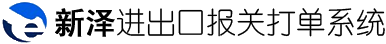
<style>
.page{position:relative;width:386px;height:44px;background:#ffffff}
.page>*{position:absolute;margin:0}
.t1{font:30px "SimHei";color:#000000;font-weight:bold}
.t2{font:30px "YouYuan";color:#000000}
</style>
<div class="page">
<p class="t1" style="left:55px;top:8px;width:60px;height:29px">新泽</p>
<p class="t2" style="left:116px;top:8px;width:269px;height:29px">进出口报关打单系统</p>
</div>
